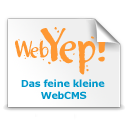
<style>
.page{position:relative;width:128px;height:128px;background:#ffffff}
.page>*{position:absolute;margin:0}
.t1{font:23.4px "Khaki-Two";letter-spacing:-0.04em;color:#fd9733}
.t2{font:9.8px "Verdana-Bold";letter-spacing:-0.025em;color:#0098cb}
.t3{font:9.8px "Verdana-Bold";letter-spacing:-0.04em;color:#0098cb}
</style>
<div class="page">
<p class="t1" style="left:15px;top:39px;width:34px;height:22px">Web</p>
<p class="t2" style="left:21px;top:79px;width:84px;height:8px">Das feine kleine</p>
<p class="t3" style="left:41px;top:91px;width:46px;height:8px">WebCMS</p>
</div>
